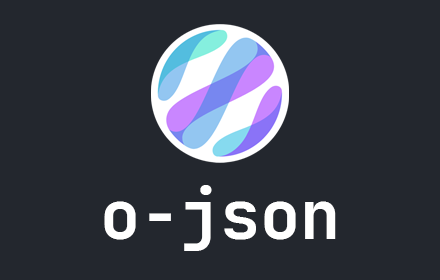
<style>
.page{position:relative;width:440px;height:280px;background:#23272e}
.page>*{position:absolute;margin:0}
.t1{font:66.7px "JetBrainsMono-Bold";color:#ffffff}
</style>
<div class="page">
<p class="t1" style="left:104px;top:185px;width:232px;height:66px">o-json</p>
</div>
